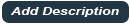
<style>
.page{position:relative;width:130px;height:24px;background:#233645}
.page>*{position:absolute;margin:0}
.t1{font:11.2px "Arial-BoldItalicMT";color:#fefefe;scale:1.25 1}
</style>
<div class="page">
<p class="t1" style="left:10px;top:7px;width:109px;height:10px">Add Description</p>
</div>
